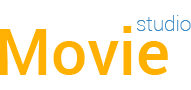
<style>
.page{position:relative;width:191px;height:90px;background:#ffffff}
.page>*{position:absolute;margin:0}
.t1{font:20.7px "Roboto-Thin";color:#3a89c5}
.t2{font:63.7px "Roboto-Medium";color:#ffb000}
</style>
<div class="page">
<p class="t1" style="left:137px;top:15px;width:54px;height:16px">studio</p>
<p class="t2" style="left:0px;top:26px;width:168px;height:49px">Movie</p>
</div>
